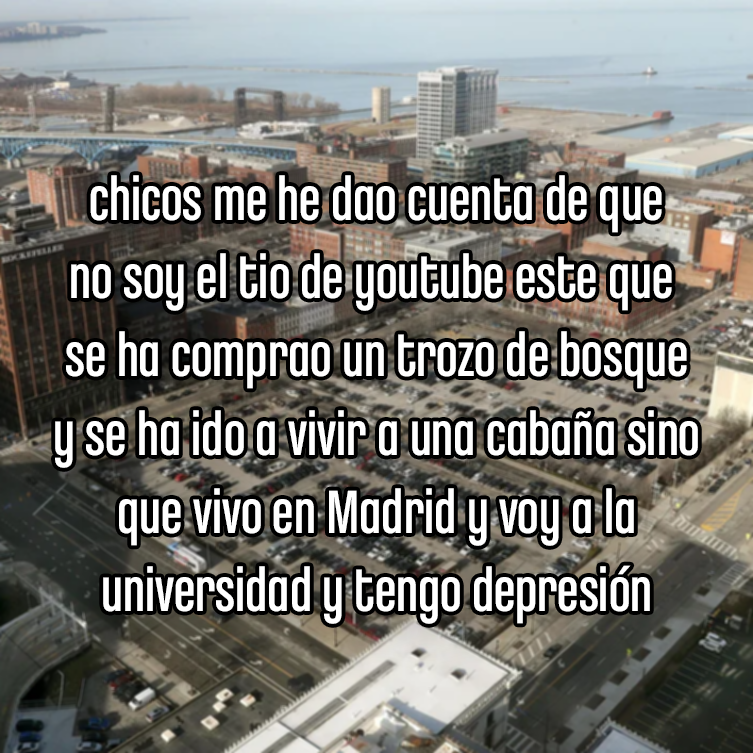
<style>
.page{position:relative;width:753px;height:753px}
.page>*{position:absolute;margin:0}
.t1{font:64.8px "ChaletComprime-CologneEighty";color:#ffffff}
</style>
<div class="page">
<p class="t1" style="left:55px;top:175px;width:643px;height:449px;text-align:center">chicos me he dao cuenta de que<br>no soy el tio de youtube este que <br>se ha comprao un trozo de bosque<br>y se ha ido a vivir a una cabaña sino<br>que vivo en Madrid y voy a la<br>universidad y tengo depresión</p>
</div>
